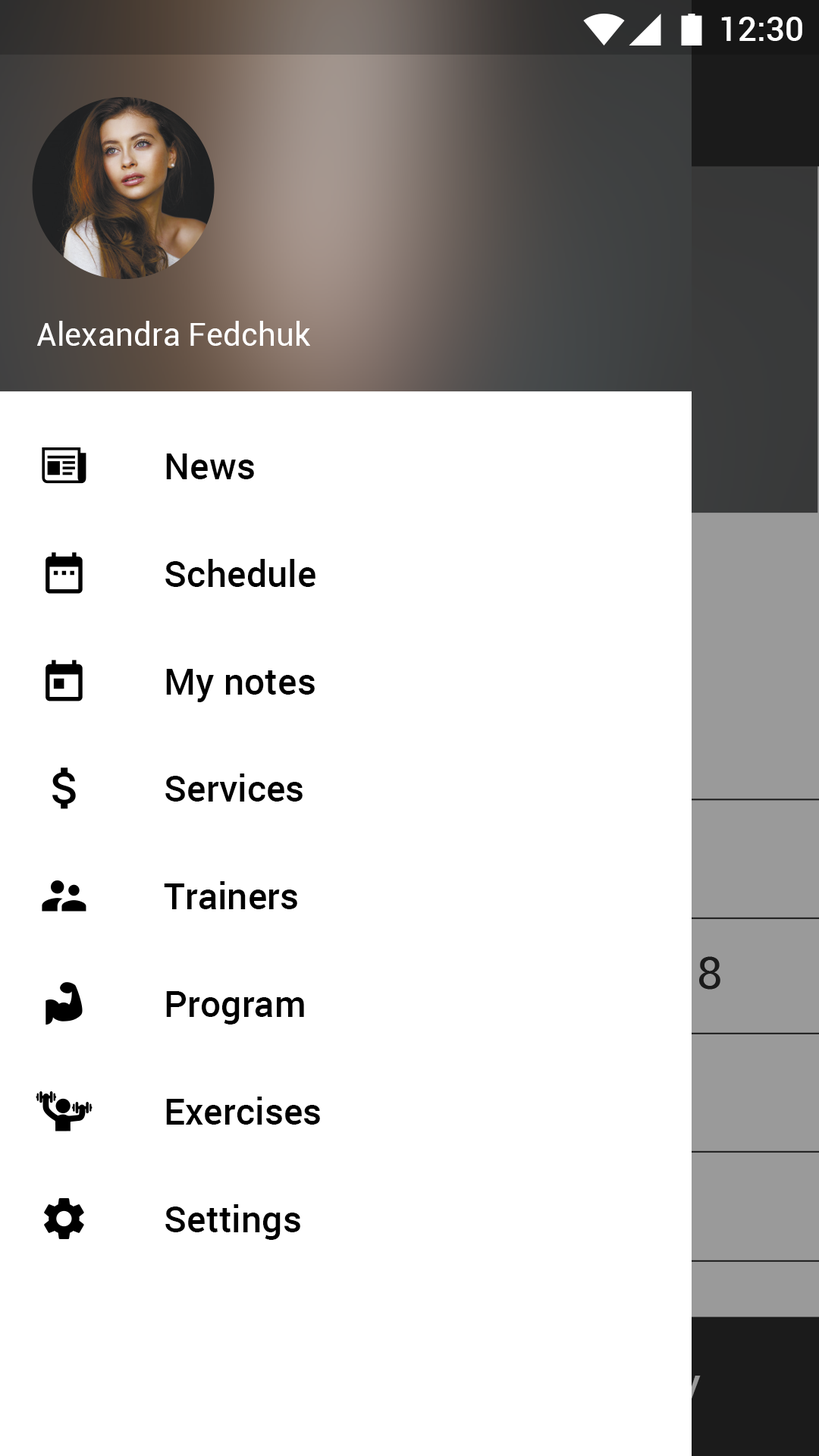
<style>
.page{position:relative;width:819px;height:1456px;background:#ffffff}
.page>*{position:absolute;margin:0}
.t1{font:33.4px "Roboto-Medium";color:#ffffff}
.t2{font:31.8px "Roboto-Regular";color:#ffffff}
.t3{font:36.4px "Roboto-Medium";color:#000000}
</style>
<div class="page">
<p class="t1" style="left:721px;top:17px;width:81px;height:24px">12:30</p>
<p class="t2" style="left:37px;top:321px;width:273px;height:25px">Alexandra Fedchuk</p>
<p class="t3" style="left:166px;top:453px;width:88px;height:26px">News</p>
<p class="t3" style="left:165px;top:559px;width:150px;height:28px">Schedule</p>
<p class="t3" style="left:166px;top:669px;width:149px;height:33px">My notes</p>
<p class="t3" style="left:165px;top:773px;width:138px;height:29px">Services</p>
<p class="t3" style="left:164px;top:881px;width:133px;height:28px">Trainers</p>
<p class="t3" style="left:166px;top:991px;width:138px;height:33px">Program</p>
<p class="t3" style="left:166px;top:1097px;width:154px;height:28px">Exercises</p>
<p class="t3" style="left:165px;top:1204px;width:135px;height:36px">Settings</p>
</div>
